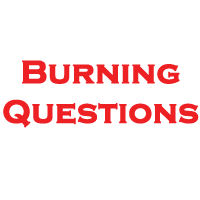
<style>
.page{position:relative;width:200px;height:200px;background:#ffffff}
.page>*{position:absolute;margin:0}
.t1{font:33px "CopperplateGothic-Bold";color:#ed2024;font-weight:bold}
</style>
<div class="page">
<p class="t1" style="left:3px;top:60px;width:196px;height:68px;text-align:center">Burning<br>Questions</p>
</div>
